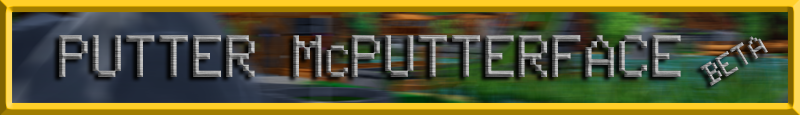
<style>
.page{position:relative;width:800px;height:115px}
.page>*{position:absolute;margin:0}
.t1{font:60.4px "Tandysoft";scale:0.94 1}
.t2{font:45.6px "Tandysoft";scale:0.94 1}
.t3{font:31px "Tandysoft";scale:0.94 1}
</style>
<div class="page">
<p class="t1" style="left:59px;top:35px;width:622px;height:42px">Putter m<span class="t2">C</span>putterface</p>
<p class="t3" style="left:700px;top:36px;width:68px;height:50px;rotate:-31deg">BETA</p>
</div>
